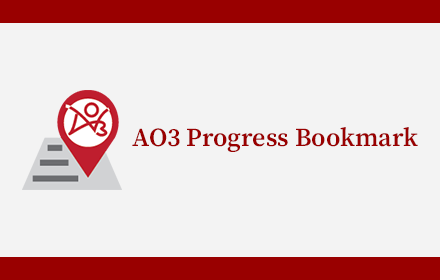
<style>
.page{position:relative;width:440px;height:280px;background:#f3f3f3}
.page>*{position:absolute;margin:0}
.t1{font:26px "SourceSerif4Roman-Semibold";color:#990000}
</style>
<div class="page">
<p class="t1" style="left:132px;top:127px;width:286px;height:25px">AO3 Progress Bookmark</p>
</div>
